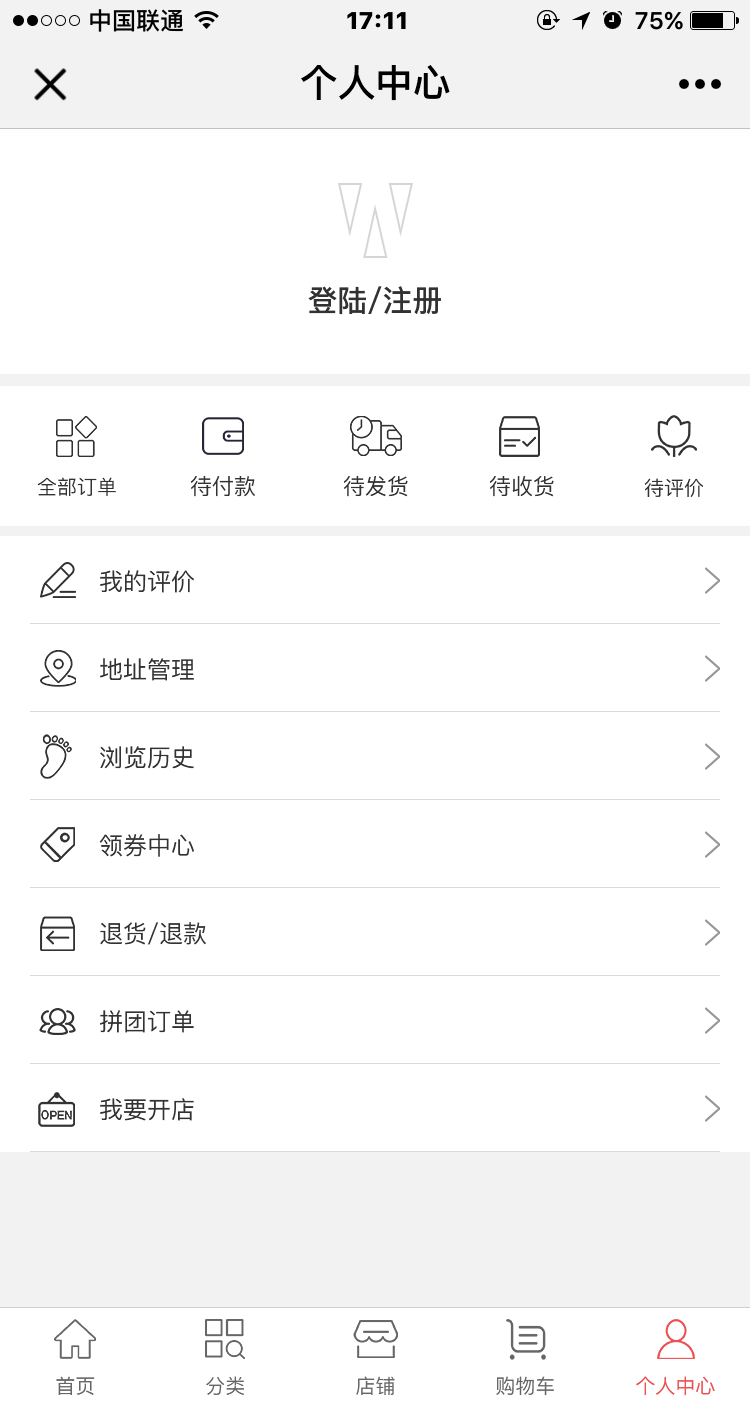
<style>
.page{position:relative;width:750px;height:1406px;background:#ffffff}
.page>*{position:absolute;margin:0}
.t1{font:37.6px "PingFang-SC-Heavy";color:#000000}
.t2{font:30px "PingFang-SC-Bold";color:#323232}
.t3{font:20px "PingFang-SC-Medium";color:#323232}
.t4{font:22px "PingFang-SC-Medium";color:#323232}
.t5{font:24px "PingFang-SC-Medium";color:#323232}
</style>
<div class="page">
<p class="t1" style="left:301px;top:65px;width:149px;height:36px">个人中心</p>
<p class="t2" style="left:308px;top:286px;width:133px;height:29px">登陆/注册</p>
<p class="t3" style="left:37px;top:477px;width:79px;height:19px">全部订单</p>
<p class="t4" style="left:190px;top:476px;width:65px;height:21px">待付款</p>
<p class="t4" style="left:343px;top:476px;width:65px;height:21px">待发货</p>
<p class="t4" style="left:489px;top:476px;width:65px;height:21px">待收货</p>
<p class="t3" style="left:644px;top:478px;width:60px;height:19px">待评价</p>
<p class="t5" style="left:100px;top:570px;width:94px;height:23px">我的评价</p>
<p class="t5" style="left:100px;top:658px;width:94px;height:23px">地址管理</p>
<p class="t5" style="left:100px;top:746px;width:94px;height:23px">浏览历史</p>
<p class="t5" style="left:99px;top:834px;width:95px;height:23px">领券中心</p>
<p class="t5" style="left:100px;top:922px;width:106px;height:23px">退货/退款</p>
<p class="t5" style="left:100px;top:1010px;width:94px;height:23px">拼团订单</p>
<p class="t5" style="left:100px;top:1098px;width:94px;height:23px">我要开店</p>
</div>
